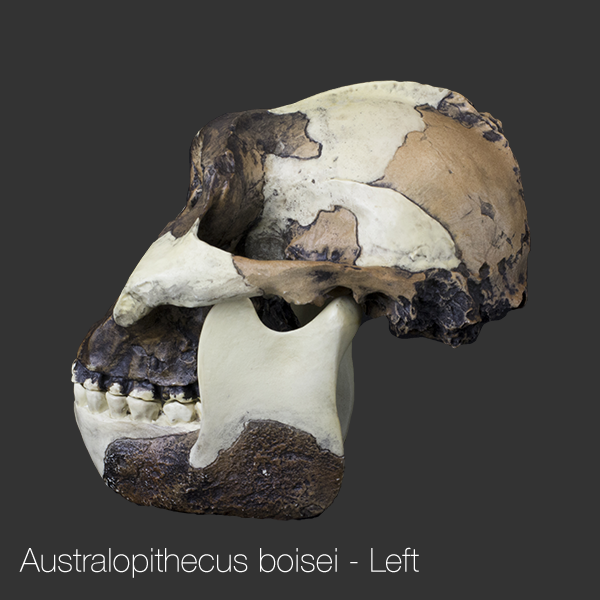
<style>
.page{position:relative;width:600px;height:600px;background:#333333}
.page>*{position:absolute;margin:0}
.t1{font:33.3px "HelveticaNeue-Thin";color:#ffffff}
</style>
<div class="page">
<p class="t1" style="left:19px;top:547px;width:400px;height:31px">Australopithecus boisei - Left</p>
</div>
